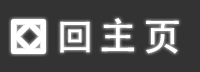
<style>
.page{position:relative;width:200px;height:72px;background:#333333}
.page>*{position:absolute;margin:0}
.t1{font:39.3px "AdobeHeitiStd-Regular";letter-spacing:0.1em;color:#ffffff}
</style>
<div class="page">
<p class="t1" style="left:60px;top:18px;width:119px;height:36px">回主页</p>
</div>
